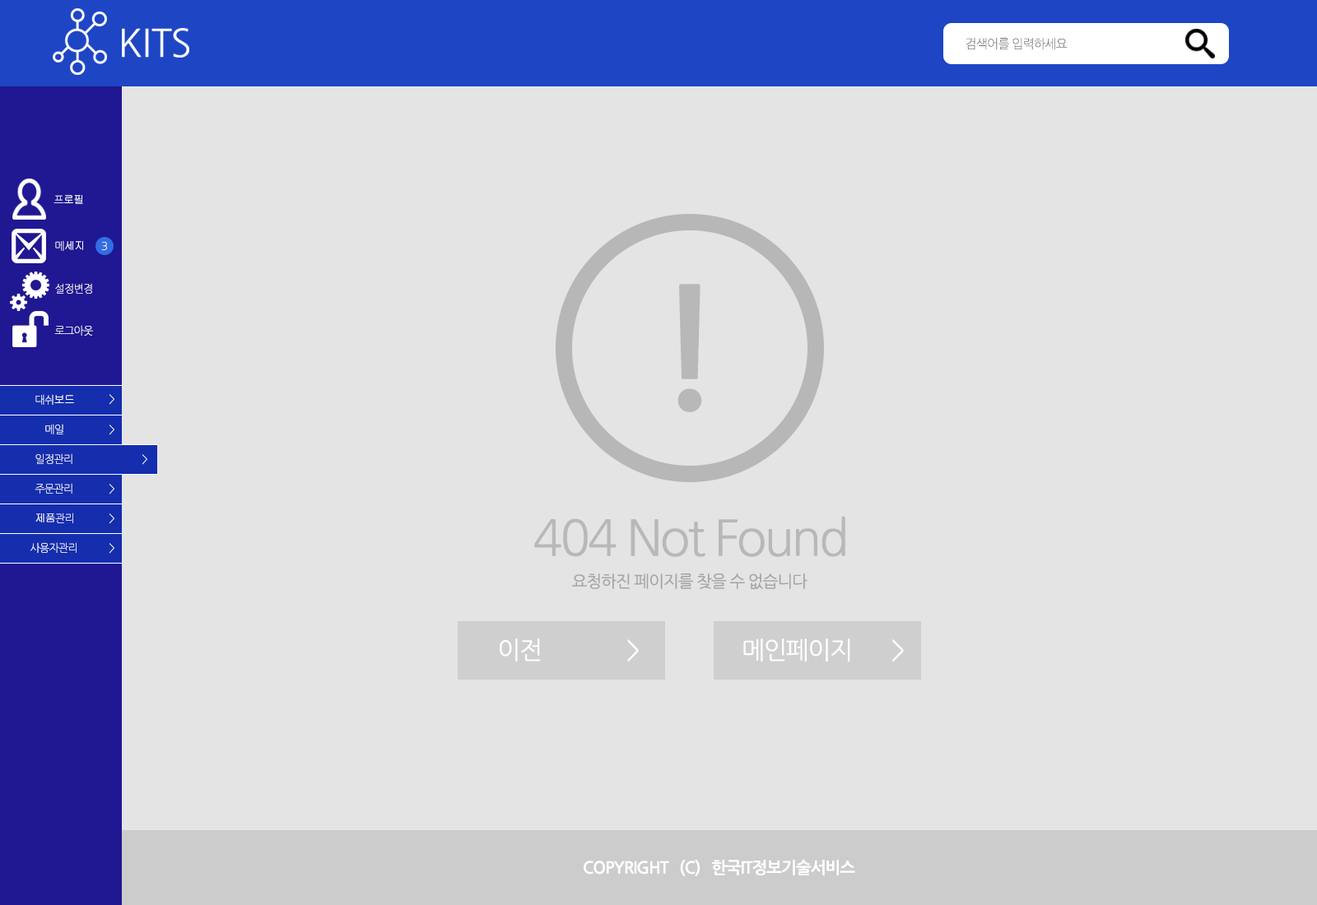
<style>
.page{position:relative;width:1317px;height:905px;background:#e4e4e4}
.page>*{position:absolute;margin:0}
.t1{font:12.3px "NanumGothicLight";letter-spacing:-0.05em;color:#737373}
.t2{font:10.7px "Gulim";letter-spacing:-0.05em;color:#ffffff}
.t3{font:10.7px "NanumGothicLight";letter-spacing:-0.05em;color:#ffffff}
.t4{font:10.7px "NanumGothicLight";letter-spacing:-0.05em}
.t5{font:164.6px "NanumGothicBold";letter-spacing:-0.05em;color:#a4a4a4}
.t6{font:49.4px "NanumGothic";letter-spacing:-0.05em;color:#a4a4a4}
.t7{font:16.5px "NanumGothic";letter-spacing:-0.05em;color:#a4a4a4}
.t8{font:24.7px "NanumGothic";letter-spacing:-0.05em;color:#ffffff}
.t9{font:16.5px "NanumGothicBold";letter-spacing:-0.05em;color:#ffffff}
</style>
<div class="page">
<p class="t1" style="left:966px;top:38px;width:102px;height:12px">검색어를 입력하세요</p>
<p class="t2" style="left:54px;top:195px;width:29px;height:9px"><span class="t3">프</span>로필</p>
<p class="t2" style="left:55px;top:240px;width:28px;height:11px"><span class="t3">메</span>세지</p>
<p class="t4" style="left:101px;top:242px;width:6px;height:9px">3</p>
<p class="t3" style="left:55px;top:283px;width:37px;height:11px">설정변경</p>
<p class="t5" style="left:677px;top:284px;width:25px;height:128px;opacity:0.7">!</p>
<p class="t3" style="left:54px;top:325px;width:40px;height:11px">로그아웃</p>
<p class="t3" style="left:35px;top:394px;width:39px;height:11px">대쉬<span class="t2">보드</span></p>
<p class="t4" style="left:109px;top:394px;width:5px;height:11px">&gt;</p>
<p class="t4" style="left:45px;top:424px;width:18px;height:11px">메일</p>
<p class="t4" style="left:109px;top:425px;width:5px;height:10px">&gt;</p>
<p class="t3" style="left:35px;top:454px;width:37px;height:10px">일정관리</p>
<p class="t4" style="left:142px;top:454px;width:5px;height:11px">&gt;</p>
<p class="t3" style="left:35px;top:483px;width:37px;height:11px">주문관리</p>
<p class="t4" style="left:109px;top:484px;width:5px;height:11px">&gt;</p>
<p class="t2" style="left:35px;top:513px;width:38px;height:11px">제품<span class="t3">관리</span></p>
<p class="t4" style="left:109px;top:514px;width:5px;height:10px">&gt;</p>
<p class="t6" style="left:534px;top:516px;width:311px;height:41px;opacity:0.7">404 Not Found</p>
<p class="t3" style="left:30px;top:542px;width:47px;height:11px">사용자관리</p>
<p class="t4" style="left:109px;top:543px;width:5px;height:11px">&gt;</p>
<p class="t7" style="left:572px;top:574px;width:235px;height:15px">요청하진 페이지를 찾을 수 없습니다</p>
<p class="t8" style="left:500px;top:639px;width:139px;height:24px">이전               &gt;</p>
<p class="t8" style="left:743px;top:639px;width:161px;height:24px">메인페이지       &gt;</p>
<p class="t9" style="left:584px;top:859px;width:271px;height:18px">COPYRIGHT   (C)   한국IT정보기술서비스</p>
</div>
